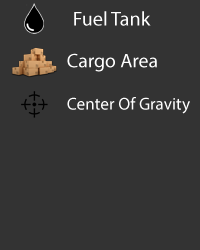
<style>
.page{position:relative;width:200px;height:250px;background:#333333}
.page>*{position:absolute;margin:0}
.t1{font:20.1px "MyriadPro-Regular";color:#ffffff}
.t2{font:19.8px "MyriadPro-Regular";color:#ffffff}
.t3{font:17.2px "MyriadPro-Regular";color:#ffffff}
</style>
<div class="page">
<p class="t1" style="left:74px;top:11px;width:77px;height:15px">Fuel Tank</p>
<p class="t2" style="left:67px;top:53px;width:90px;height:19px">Cargo Area</p>
<p class="t3" style="left:67px;top:97px;width:123px;height:17px">Center Of Gravity</p>
</div>
